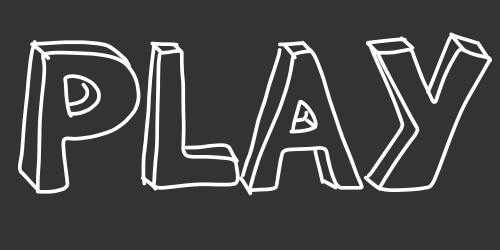
<style>
.page{position:relative;width:500px;height:250px;background:#333333}
.page>*{position:absolute;margin:0}
.t1{font:200px "THE_MILLION_MILE_MAN";color:#ffffff}
</style>
<div class="page">
<p class="t1" style="left:18px;top:32px;width:474px;height:164px">Play</p>
</div>
